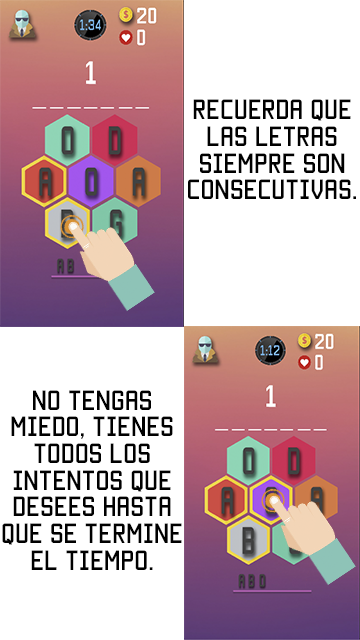
<style>
.page{position:relative;width:360px;height:640px;background:#ffffff}
.page>*{position:absolute;margin:0}
.t1{font:22.2px "Manteka";color:#000000}
</style>
<div class="page">
<p class="t1" style="left:188px;top:99px;width:168px;height:100px;text-align:center">REcuerda que las letras siempre son consecutivas.</p>
<p class="t1" style="left:2px;top:390px;width:180px;height:180px;text-align:center">no tengas miedo, tienes todos los <br>intentos que desees hasta que se termine el tiempo.</p>
</div>
